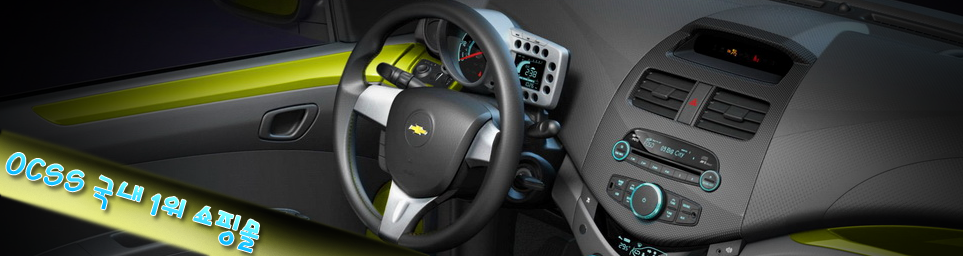
<style>
.page{position:relative;width:963px;height:256px}
.page>*{position:absolute;margin:0}
.t1{font:31.6px "Yj-GABI-Bold";text-transform:uppercase}
</style>
<div class="page">
<p class="t1" style="left:6px;top:153px;width:253px;height:100px;rotate:16deg">OCSS 국내 1위 쇼핑몰</p>
</div>
